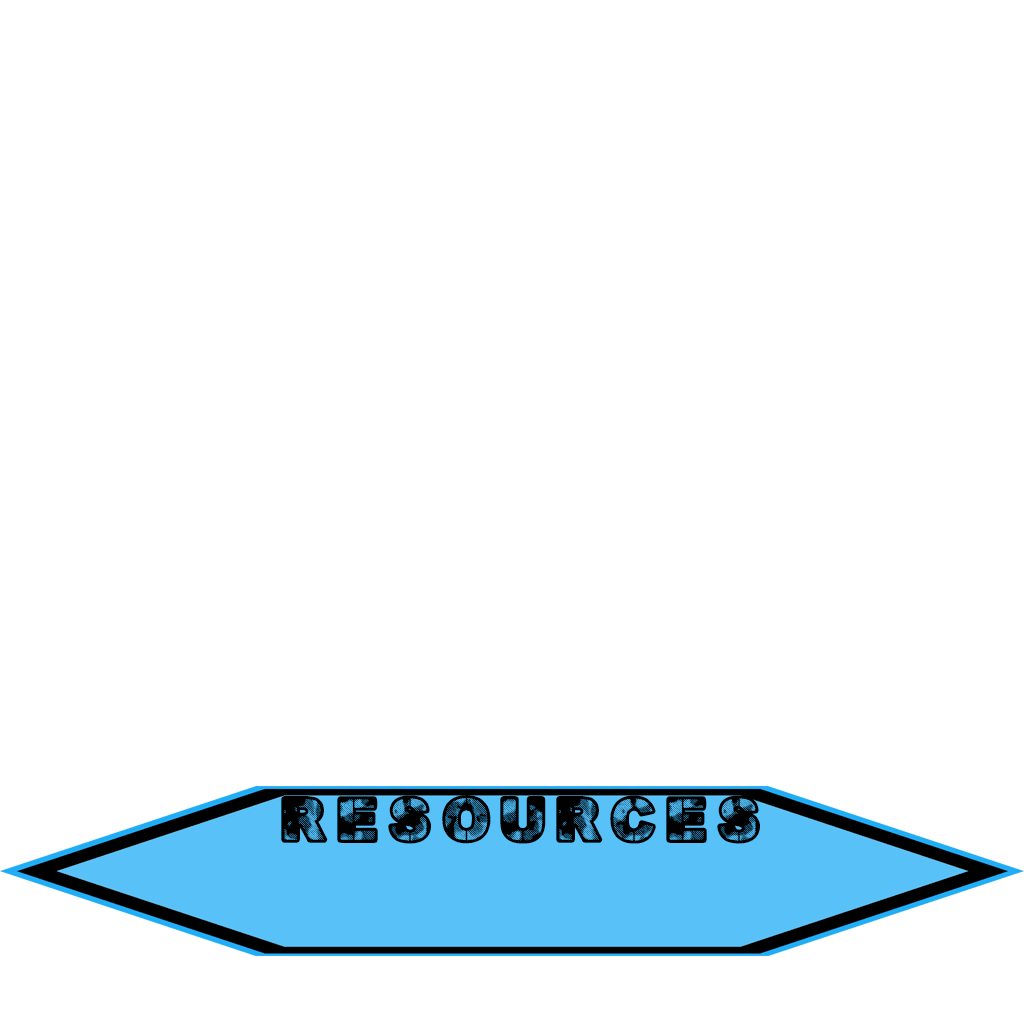
<style>
.page{position:relative;width:1024px;height:1024px;background:#ffffff}
.page>*{position:absolute;margin:0}
.t1{font:45.9px "Search'nDestroy";letter-spacing:0.16em;color:#000000}
</style>
<div class="page">
<p class="t1" style="left:281px;top:795px;width:479px;height:49px">RESOURCES</p>
</div>
